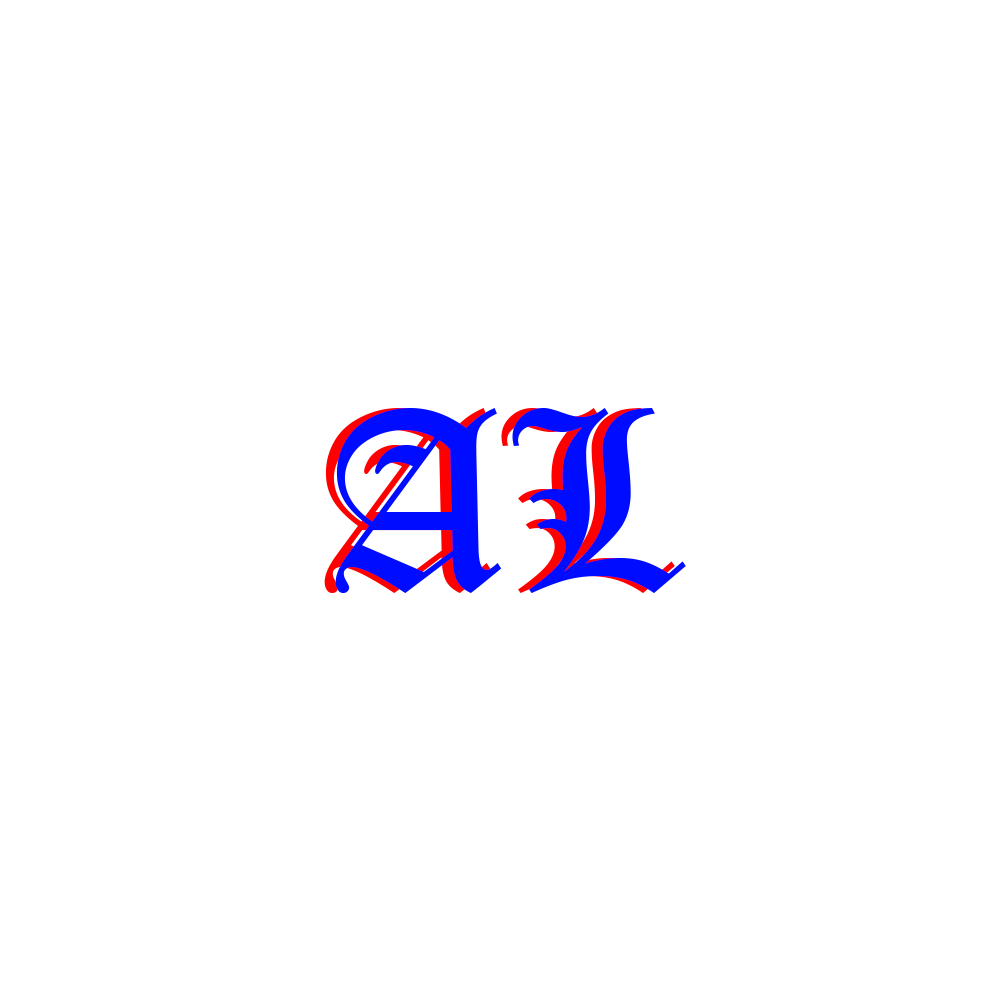
<style>
.page{position:relative;width:1000px;height:1000px;background:#ffffff}
.page>*{position:absolute;margin:0}
.t1{font:250px "OldEnglishTextMT"}
.t2{font:250px "OldEnglishTextMT";color:#000cff}
</style>
<div class="page">
<p class="t1" style="left:324px;top:408px;width:351px;height:185px">AL</p>
<p class="t2" style="left:335px;top:408px;width:351px;height:185px">AL</p>
</div>
